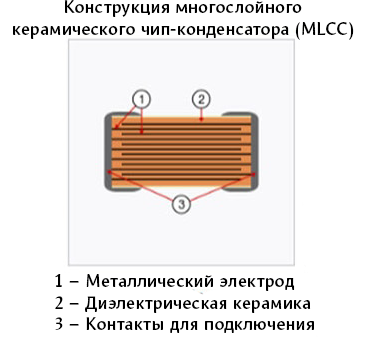
<style>
.page{position:relative;width:369px;height:343px;background:#ffffff}
.page>*{position:absolute;margin:0}
.t1{font:18px "Mezzo-Bold";color:#000000}
</style>
<div class="page">
<p class="t1" style="left:13px;top:0px;width:341px;height:40px;text-align:center">Конструкция многослойного<br>керамического чип-конденсатора (MLCC)</p>
<p class="t1" style="left:55px;top:274px;width:259px;height:59px">1 – Металлический электрод<br>2 – Диэлектрическая керамика<br>3 – Контакты для подключения</p>
</div>
